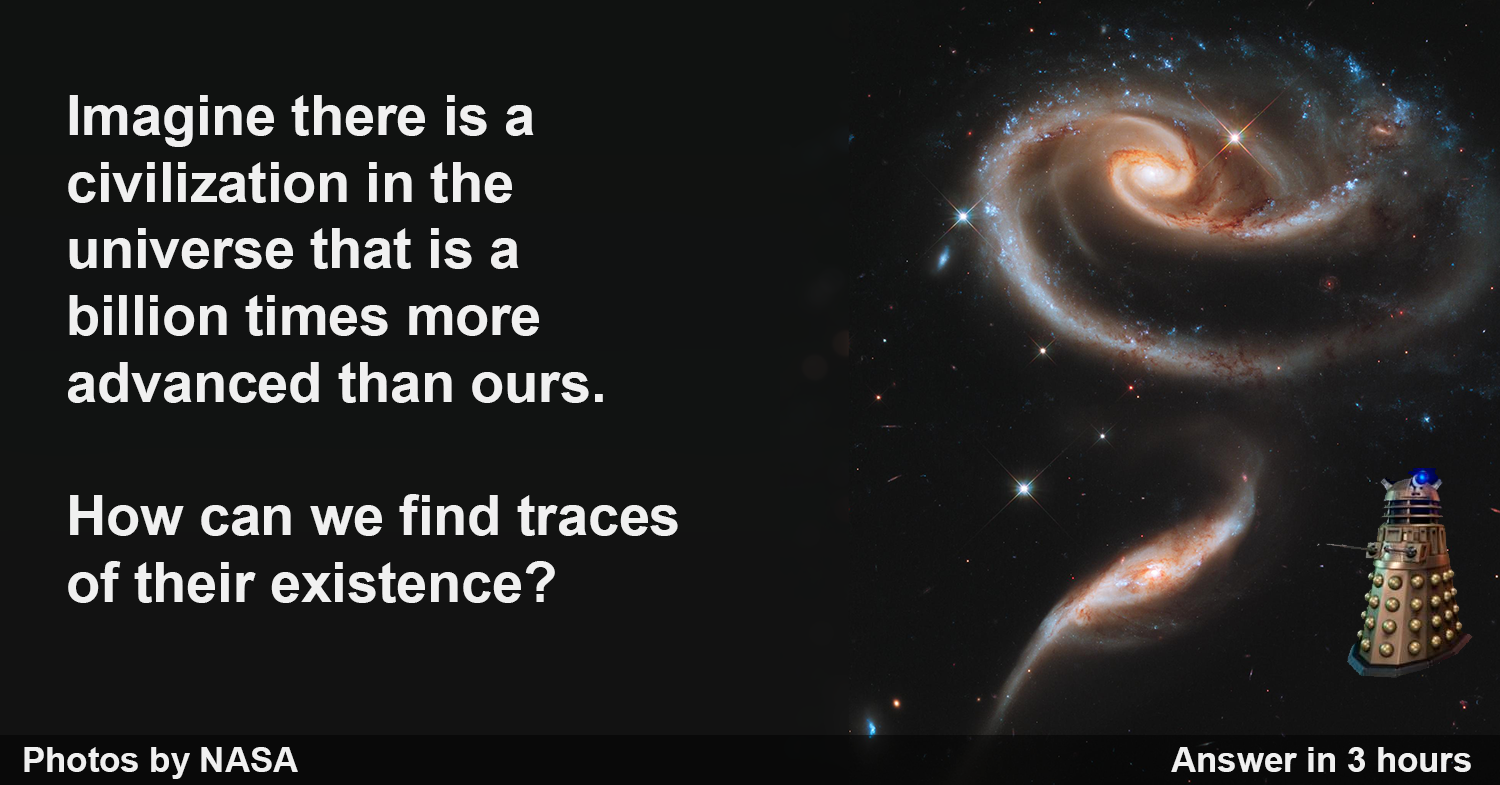
<style>
.page{position:relative;width:1500px;height:785px}
.page>*{position:absolute;margin:0}
.t1{font:55.6px "Arial-BoldMT";color:#f0f0f0}
.t2{font:34.7px "Arial-BoldMT";color:#f0f0f0}
</style>
<div class="page">
<p class="t1" style="left:68px;top:95px;width:610px;height:508px">Imagine there is a <br>civilization in the <br>universe that is a <br>billion times more <br>advanced than ours.<br><br>How can we find traces <br>of their existence?</p>
<p class="t2" style="left:24px;top:747px;width:274px;height:32px">Photos by NASA</p>
<p class="t2" style="left:1171px;top:747px;width:300px;height:25px">Answer in 3 hours</p>
</div>
